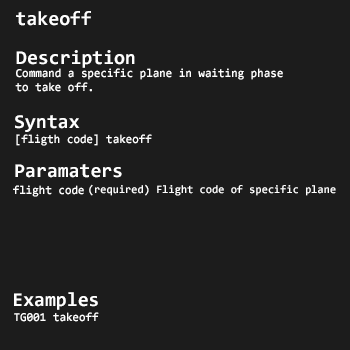
<style>
.page{position:relative;width:350px;height:350px;background:#1c1c1c}
.page>*{position:absolute;margin:0}
.t1{font:19.8px "Consolas-Bold";color:#ffffff}
.t2{font:11.9px "Consolas-Bold";color:#ffffff}
.t3{font:11.3px "Consolas-Bold";color:#ffffff}
</style>
<div class="page">
<p class="t1" style="left:16px;top:11px;width:75px;height:15px">takeoff</p>
<p class="t1" style="left:16px;top:50px;width:119px;height:18px">Description</p>
<p class="t2" style="left:15px;top:68px;width:268px;height:24px">Command a specific plane in waiting phase<br>to take off.</p>
<p class="t1" style="left:15px;top:115px;width:65px;height:17px">Syntax</p>
<p class="t2" style="left:16px;top:134px;width:136px;height:12px">[fligth code] takeoff</p>
<p class="t1" style="left:15px;top:164px;width:107px;height:14px">Paramaters</p>
<p class="t2" style="left:13px;top:185px;width:71px;height:12px">flight code</p>
<p class="t3" style="left:89px;top:184px;width:247px;height:12px">(required) Flight code of specific plane</p>
<p class="t1" style="left:14px;top:292px;width:84px;height:18px">Examples</p>
<p class="t2" style="left:14px;top:312px;width:85px;height:10px">TG001 takeoff</p>
</div>
